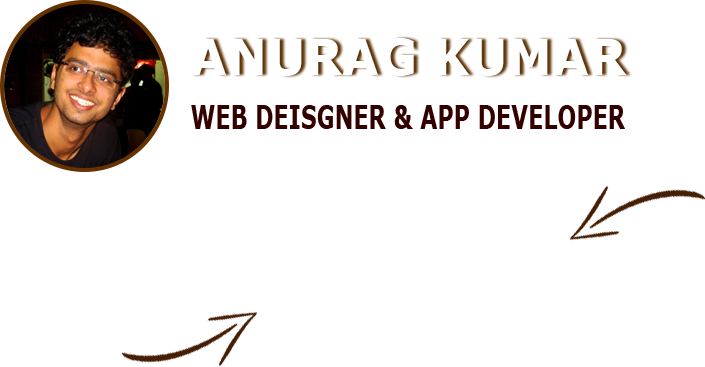
<style>
.page{position:relative;width:705px;height:367px;background:#ffffff}
.page>*{position:absolute;margin:0}
.t1{font:49.8px "Verdana-Bold";color:#ffffff;scale:0.95 1}
.t2{font:32px "Verdana-Bold";color:#330000;scale:0.69 1}
</style>
<div class="page">
<p class="t1" style="left:190px;top:38px;width:437px;height:38px">ANURAG KUMAR</p>
<p class="t2" style="left:191px;top:105px;width:434px;height:24px">WEB DEISGNER &amp; APP DEVELOPER</p>
</div>
